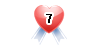
<style>
.page{position:relative;width:100px;height:50px;background:#ffffff}
.page>*{position:absolute;margin:0}
.t1{font:12px "Dotum";color:#000000;font-weight:bold}
</style>
<div class="page">
<p class="t1" style="left:46px;top:14px;width:6px;height:9px">7</p>
</div>
